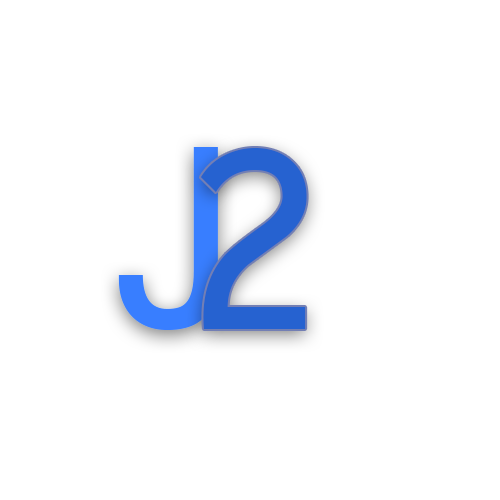
<style>
.page{position:relative;width:500px;height:500px;background:#ffffff}
.page>*{position:absolute;margin:0}
.t1{font:273px "Gautami";color:#387efe}
.t2{font:273px "Gautami";color:#2662d0}
</style>
<div class="page">
<p class="t1" style="left:118px;top:147px;width:100px;height:183px">J</p>
<p class="t2" style="left:200px;top:148px;width:107px;height:181px">2</p>
</div>
